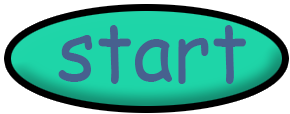
<style>
.page{position:relative;width:290px;height:114px;background:#ffffff}
.page>*{position:absolute;margin:0}
.t1{font:82.1px "ComicSansMS";color:#47618f;scale:0.96 1}
</style>
<div class="page">
<p class="t1" style="left:58px;top:25px;width:188px;height:59px">start</p>
</div>
